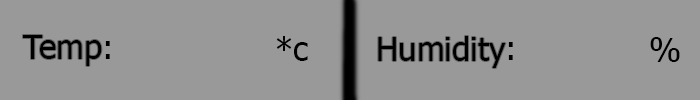
<style>
.page{position:relative;width:700px;height:100px;background:#999999}
.page>*{position:absolute;margin:0}
.t1{font:33px "Tahoma";color:#000000}
</style>
<div class="page">
<p class="t1" style="left:23px;top:35px;width:79px;height:31px">Temp</p>
<p class="t1" style="left:105px;top:41px;width:5px;height:18px">:</p>
<p class="t1" style="left:276px;top:36px;width:32px;height:25px">c*</p>
<p class="t1" style="left:378px;top:36px;width:128px;height:32px">Humidity</p>
<p class="t1" style="left:650px;top:37px;width:30px;height:25px">%</p>
<p class="t1" style="left:508px;top:42px;width:5px;height:18px">:</p>
</div>
